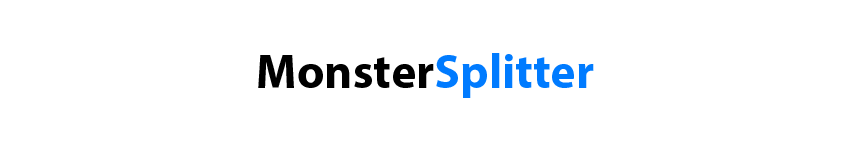
<style>
.page{position:relative;width:850px;height:150px;background:#ffffff}
.page>*{position:absolute;margin:0}
.t1{font:48px "MyriadPro-Bold";color:#007bff}
.t2{font:48px "MyriadPro-Bold";color:#000000}
</style>
<div class="page">
<p class="t1" style="left:258px;top:53px;width:336px;height:45px"><span class="t2">Monster</span>Splitter</p>
</div>
